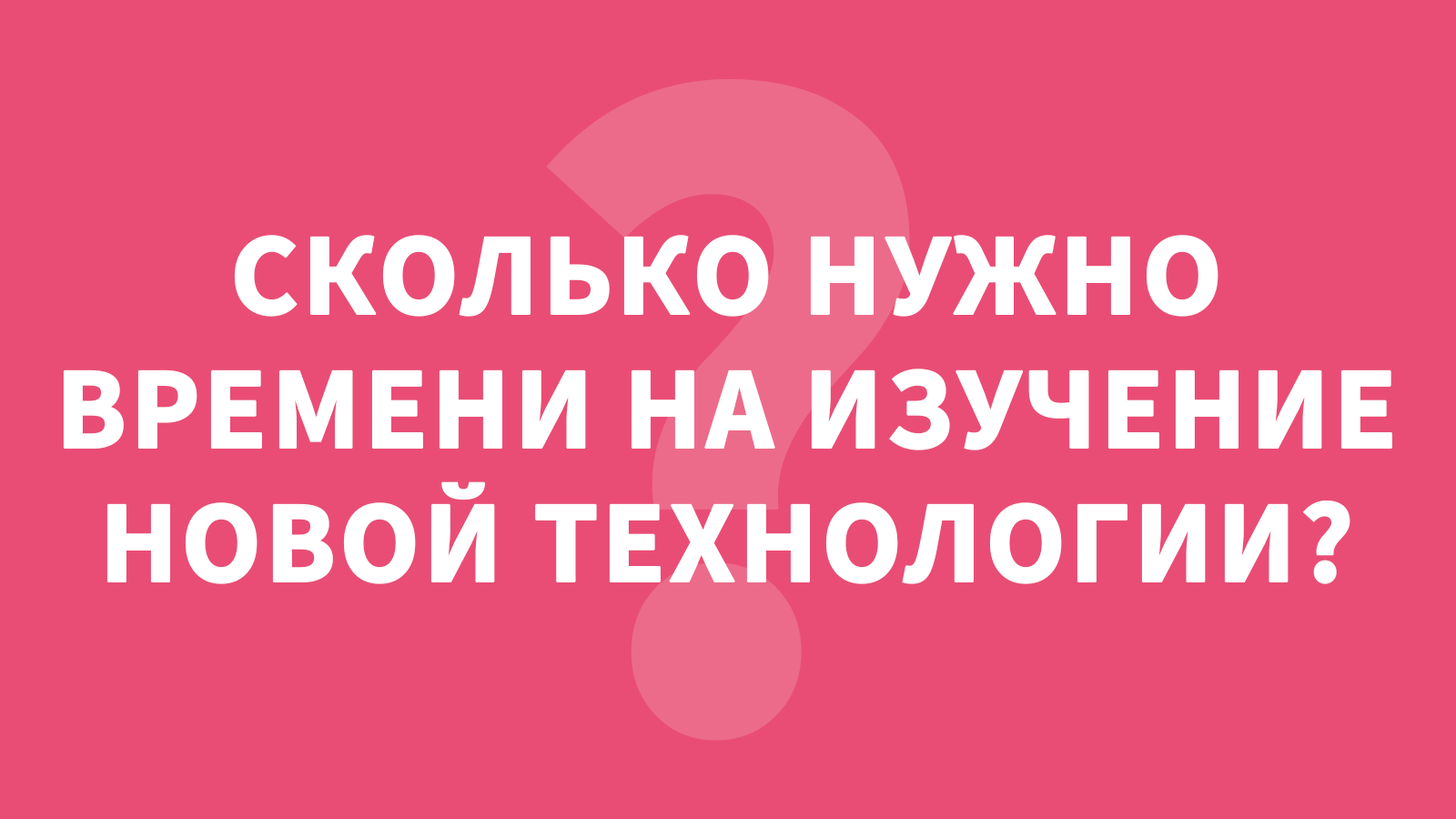
<style>
.page{position:relative;width:1456px;height:819px;background:#e94d75}
.page>*{position:absolute;margin:0}
.t1{font:117.8px/117.4px "SourceSansPro-Bold";color:#ffffff;text-transform:uppercase;font-weight:bold}
</style>
<div class="page">
<p class="t1" style="left:63px;top:235px;width:1329px;height:349px;text-align:center">сколько нужно<br>времени На изучение<br>новой технологии?</p>
</div>
